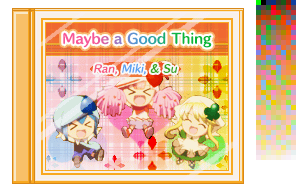
<style>
.page{position:relative;width:296px;height:192px}
.page>*{position:absolute;margin:0}
.t1{font:13px "HummingStd-B";letter-spacing:0.02em}
.t2{font:10px "HummingStd-D";letter-spacing:0.02em;color:#58a0f0;font-style:italic}
.t3{font:10px "HummingStd-D";letter-spacing:0.02em;color:#f85880;font-style:italic}
.t4{font:10px "HummingStd-D";letter-spacing:0.02em;color:#38a820;font-style:italic}
</style>
<div class="page">
<p class="t1" style="left:63px;top:32px;width:149px;height:16px">Maybe a Good Thing</p>
<p class="t2" style="left:94px;top:63px;width:84px;height:12px"><span class="t3">Ran, </span>Miki, <span class="t4">&amp; Su</span></p>
</div>
